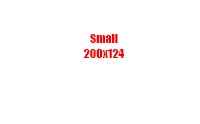
<style>
.page{position:relative;width:200px;height:124px;background:#ffffff}
.page>*{position:absolute;margin:0}
.t1{font:12px "Impact";color:#fa0000}
</style>
<div class="page">
<p class="t1" style="left:84px;top:34px;width:41px;height:24px;text-align:center">Small<br>200x124</p>
</div>
